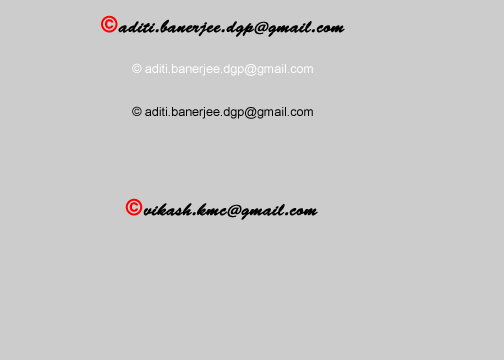
<style>
.page{position:relative;width:504px;height:360px;background:#cccccc}
.page>*{position:absolute;margin:0}
.t1{font:18px "BrushScriptStd";color:#000000;font-weight:bold}
.t2{font:22.5px "BrushScriptStd";color:#ff0000}
.t3{font:12.5px "ArialMT";color:#ffffff}
.t4{font:12.5px "ArialMT";color:#000000}
</style>
<div class="page">
<p class="t1" style="left:101px;top:15px;width:244px;height:22px"><span class="t2">©</span>aditi.banerjee.dgp@gmail.com</p>
<p class="t3" style="left:132px;top:63px;width:181px;height:13px">© aditi.banerjee.dgp@gmail.com</p>
<p class="t4" style="left:132px;top:106px;width:181px;height:13px">© aditi.banerjee.dgp@gmail.com</p>
<p class="t1" style="left:125px;top:198px;width:193px;height:22px"><span class="t2">©</span>vikash.kmc@gmail.com</p>
</div>
